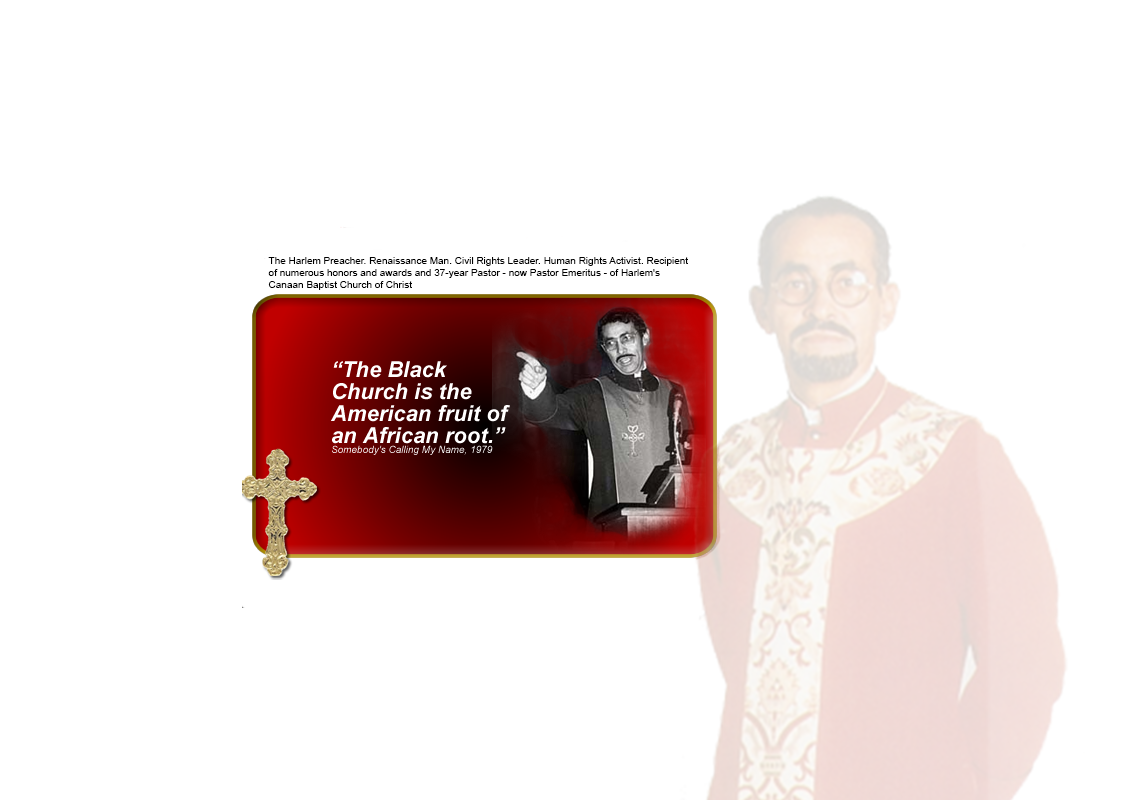
<style>
.page{position:relative;width:1140px;height:800px;background:#ffffff}
.page>*{position:absolute;margin:0}
.t1{font:10px "ArialMT";color:#000000}
</style>
<div class="page">
<p class="t1" style="left:268px;top:257px;width:420px;height:33px">The Harlem Preacher. Renaissance Man. Civil Rights Leader. Human Rights Activist. Recipient <br>of numerous honors and awards and 37-year Pastor - now Pastor Emeritus - of Harlem's <br>Canaan Baptist Church of Christ</p>
</div>
